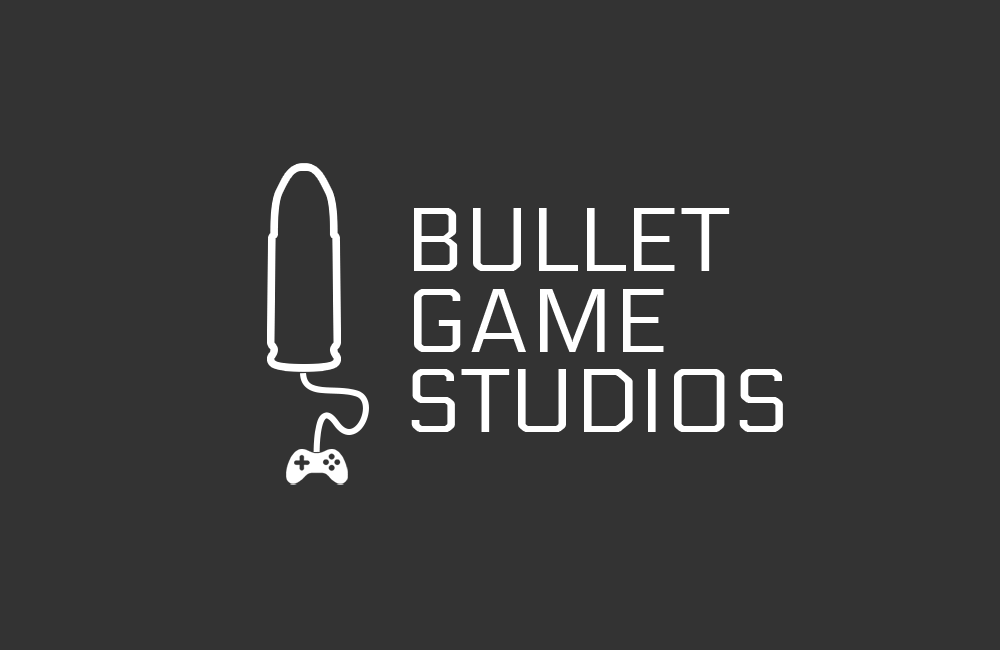
<style>
.page{position:relative;width:1000px;height:650px;background:#333333}
.page>*{position:absolute;margin:0}
.t1{font:90.3px/80.6px "Electrolize-Regular";color:#ffffff}
</style>
<div class="page">
<p class="t1" style="left:411px;top:208px;width:372px;height:224px">BULLET<br>GAME<br>STUDIOS</p>
</div>
